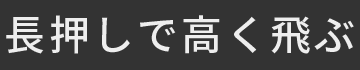
<style>
.page{position:relative;width:360px;height:70px;background:#333333}
.page>*{position:absolute;margin:0}
.t1{font:41px "SourceHanSansJP-Medium";letter-spacing:0.08em;color:#eeeeee}
</style>
<div class="page">
<p class="t1" style="left:6px;top:15px;width:348px;height:39px">長押しで高く飛ぶ</p>
</div>
